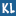
<style>
.page{position:relative;width:16px;height:16px;background:#1b5f93}
.page>*{position:absolute;margin:0}
.t1{font:12.1px "MarkerFelt-Thin";letter-spacing:0.02em;color:#ffffff;text-transform:uppercase}
</style>
<div class="page">
<p class="t1" style="left:2px;top:3px;width:13px;height:11px">KL</p>
</div>
